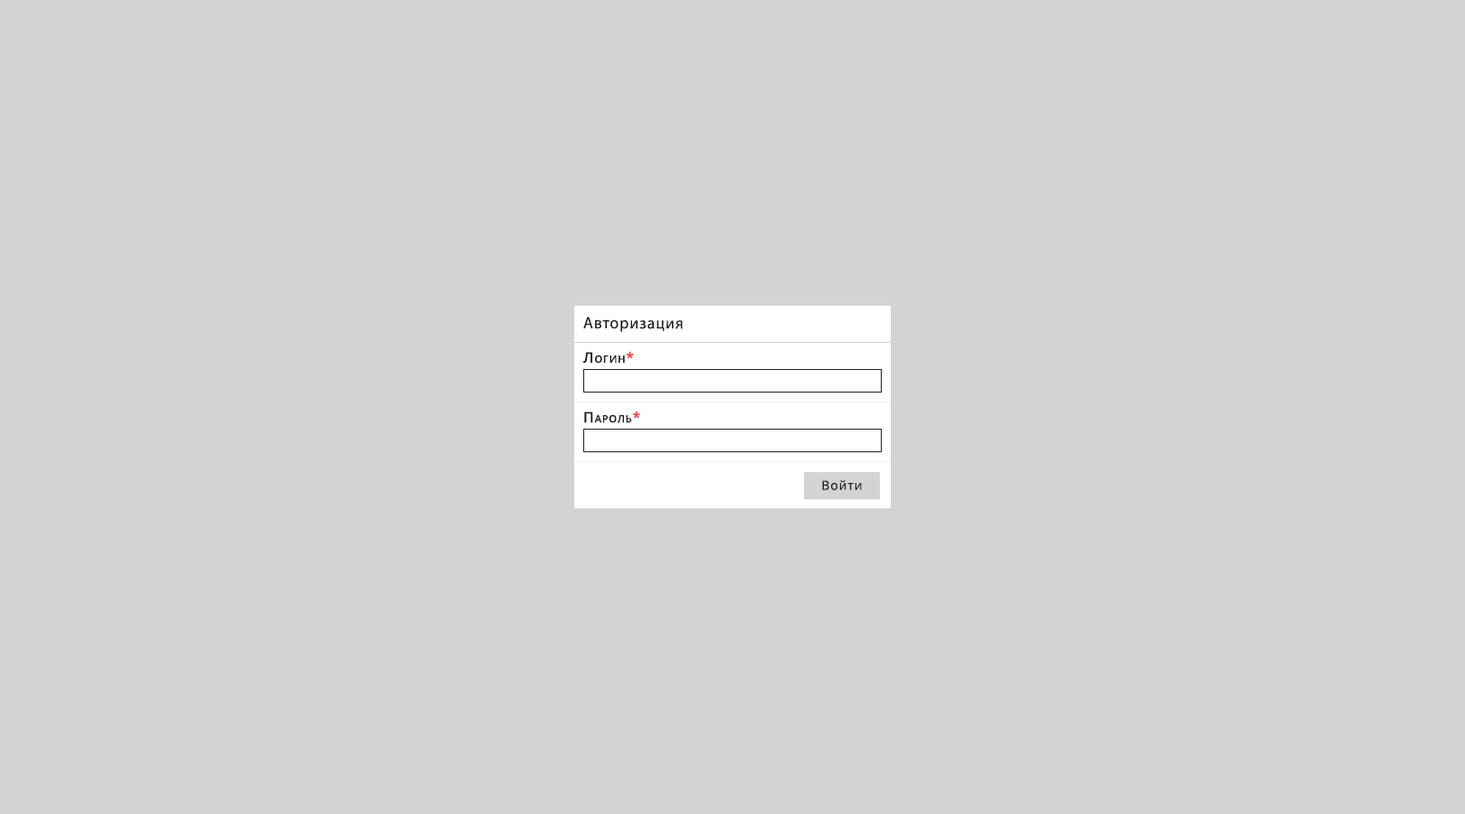
<style>
.page{position:relative;width:1465px;height:814px;background:#d3d3d3}
.page>*{position:absolute;margin:0}
.t1{font:16.3px "MyriadPro-Regular";letter-spacing:0.06em;color:#212121}
.t2{font:14.5px "OpenSans-SemiBold";letter-spacing:0.06em;color:#212121;font-variant:small-caps}
.t3{font:14.5px "OpenSans-SemiBold";letter-spacing:0.06em;color:#ec4646;font-variant:small-caps}
.t4{font:12.7px "OpenSans-Regular";letter-spacing:0.06em;color:#212121}
</style>
<div class="page">
<p class="t1" style="left:583px;top:317px;width:100px;height:15px">Авторизация</p>
<p class="t2" style="left:582px;top:351px;width:52px;height:13px">Логин<span class="t3">*</span></p>
<p class="t2" style="left:584px;top:411px;width:56px;height:12px">Пароль<span class="t3">*</span></p>
<p class="t4" style="left:822px;top:480px;width:40px;height:10px">Войти</p>
</div>
